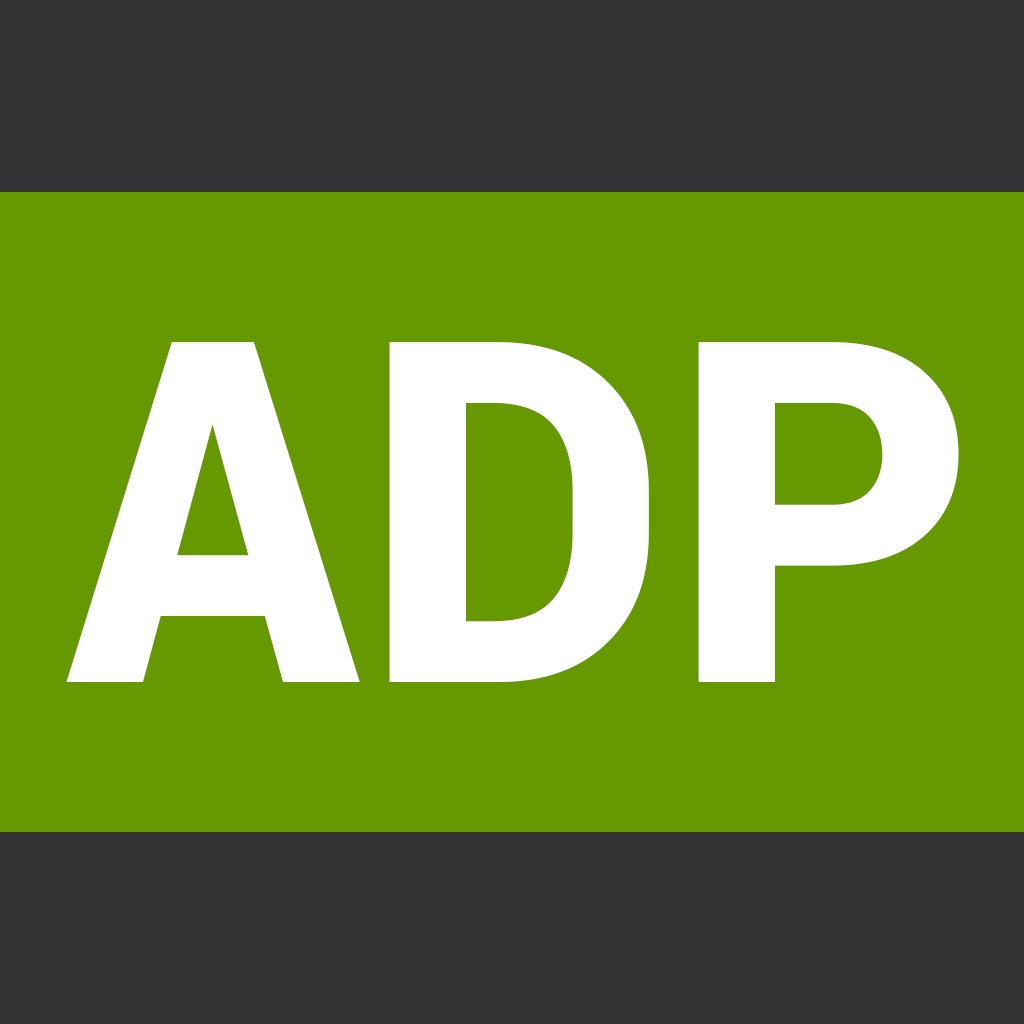
<style>
.page{position:relative;width:1024px;height:1024px;background:#669900}
.page>*{position:absolute;margin:0}
.t1{font:478.1px "Roboto-Black";letter-spacing:0.01em;color:#ffffff;scale:0.97 1}
</style>
<div class="page">
<p class="t1" style="left:66px;top:342px;width:893px;height:340px">ADP</p>
</div>
